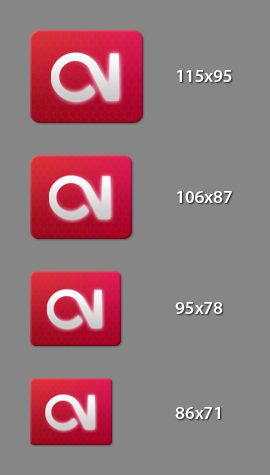
<style>
.page{position:relative;width:270px;height:475px;background:#868686}
.page>*{position:absolute;margin:0}
.t1{font:18px "MyriadPro-Semibold";color:#ffffff}
</style>
<div class="page">
<p class="t1" style="left:177px;top:70px;width:55px;height:12px">115x95</p>
<p class="t1" style="left:177px;top:191px;width:55px;height:12px">106x87</p>
<p class="t1" style="left:175px;top:302px;width:48px;height:12px">95x78</p>
<p class="t1" style="left:175px;top:407px;width:45px;height:12px">86x71</p>
</div>
